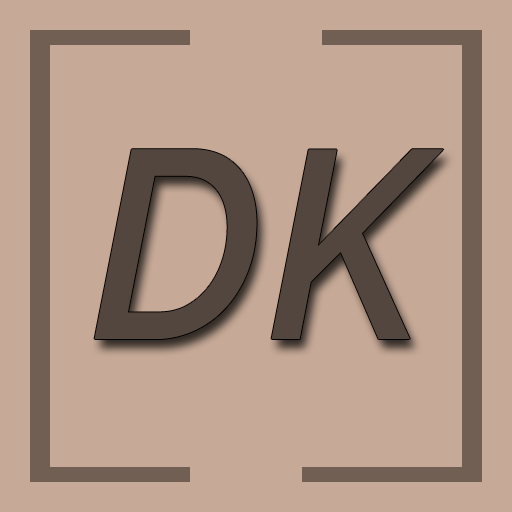
<style>
.page{position:relative;width:512px;height:512px;background:#c6a996}
.page>*{position:absolute;margin:0}
.t1{font:267.3px "Raleway-SemiBoldItalic";letter-spacing:0.025em;color:#53463e;scale:0.92 1}
</style>
<div class="page">
<p class="t1" style="left:94px;top:149px;width:350px;height:190px">DK</p>
</div>
